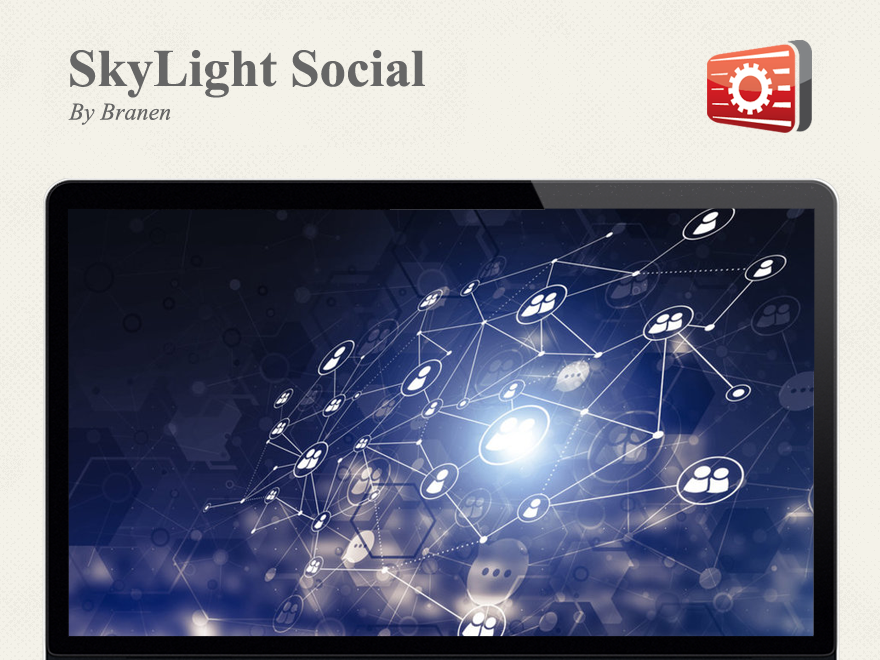
<style>
.page{position:relative;width:880px;height:660px;background:#f4f2e9}
.page>*{position:absolute;margin:0}
.t1{font:53px "TimesNewRomanPS-BoldMT";color:#666666}
.t2{font:24px "TimesNewRomanPS-ItalicMT";color:#666666}
</style>
<div class="page">
<p class="t1" style="left:70px;top:50px;width:355px;height:48px">SkyLight Social</p>
<p class="t2" style="left:68px;top:103px;width:103px;height:22px">By Branen</p>
</div>
